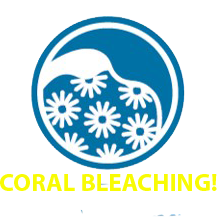
<style>
.page{position:relative;width:218px;height:217px;background:#ffffff}
.page>*{position:absolute;margin:0}
.t1{font:12px "MyriadPro-Bold";color:#f8fb04}
</style>
<div class="page">
<p class="t1" style="left:0px;top:174px;width:217px;height:17px">CORAL BLEACHING!</p>
</div>
